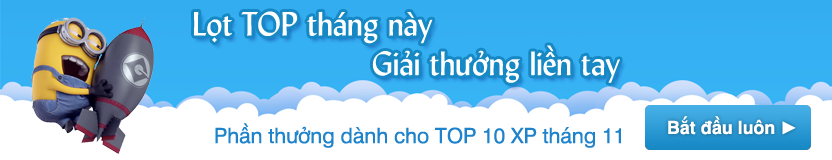
<style>
.page{position:relative;width:832px;height:160px;background:#ffffff}
.page>*{position:absolute;margin:0}
.t1{font:33px "UVNLaXanh";color:#ffffff}
.t2{font:21px "UVNHongHa";color:#1e83ca}
.t3{font:18px "UVNHongHaBold";color:#ffffff}
.t4{font:18px "TimesNewRomanPSMT";color:#ffffff}
</style>
<div class="page">
<p class="t1" style="left:194px;top:11px;width:426px;height:72px">Lọt TOP tháng này<br>     Giải thưởng liền tay</p>
<p class="t2" style="left:215px;top:123px;width:406px;height:25px">Phần thưởng dành cho TOP 10 XP tháng 11</p>
<p class="t3" style="left:668px;top:116px;width:128px;height:19px">Bắt đầu luôn <span class="t4">►</span></p>
<p class="t3" style="left:668px;top:116px;width:128px;height:19px">Bắt đầu luôn <span class="t4">►</span></p>
</div>
